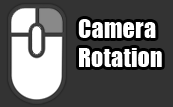
<style>
.page{position:relative;width:173px;height:107px;background:#333333}
.page>*{position:absolute;margin:0}
.t1{font:24.4px "Impact";color:#ffffff}
</style>
<div class="page">
<p class="t1" style="left:78px;top:19px;width:84px;height:48px">Camera<br>Rotation</p>
</div>
